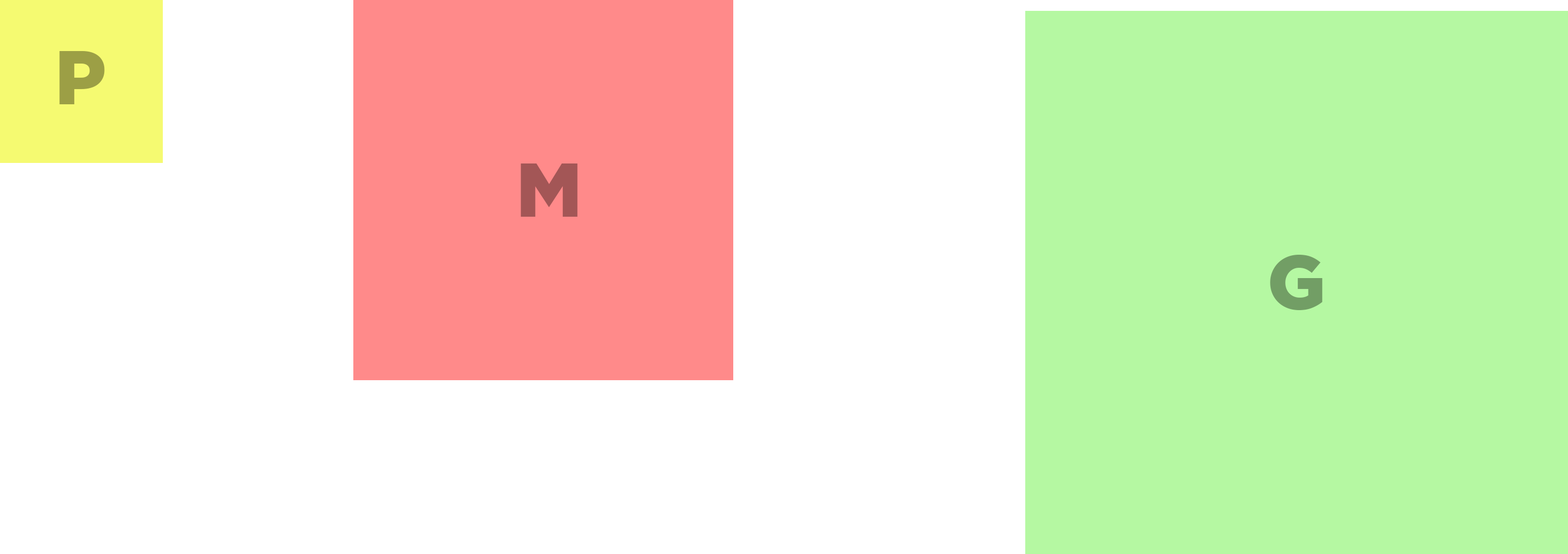
<style>
.page{position:relative;width:1568px;height:554px;background:#ffffff}
.page>*{position:absolute;margin:0}
.t1{font:76px "GothamBlack";color:#9c9f45}
.t2{font:76px "GothamBlack";color:#a35656}
.t3{font:76px "GothamBlack";color:#729e65}
</style>
<div class="page">
<p class="t1" style="left:59px;top:51px;width:46px;height:53px">P</p>
<p class="t2" style="left:520px;top:163px;width:57px;height:54px">M</p>
<p class="t3" style="left:1270px;top:255px;width:53px;height:55px">G</p>
</div>
